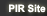
<style>
.page{position:relative;width:47px;height:16px}
.page>*{position:absolute;margin:0}
.t1{font:10.2px "ArialNarrow-Bold";color:#ffffff;scale:1.18 1}
</style>
<div class="page">
<p class="t1" style="left:8px;top:3px;width:38px;height:12px">PIR Site</p>
</div>
